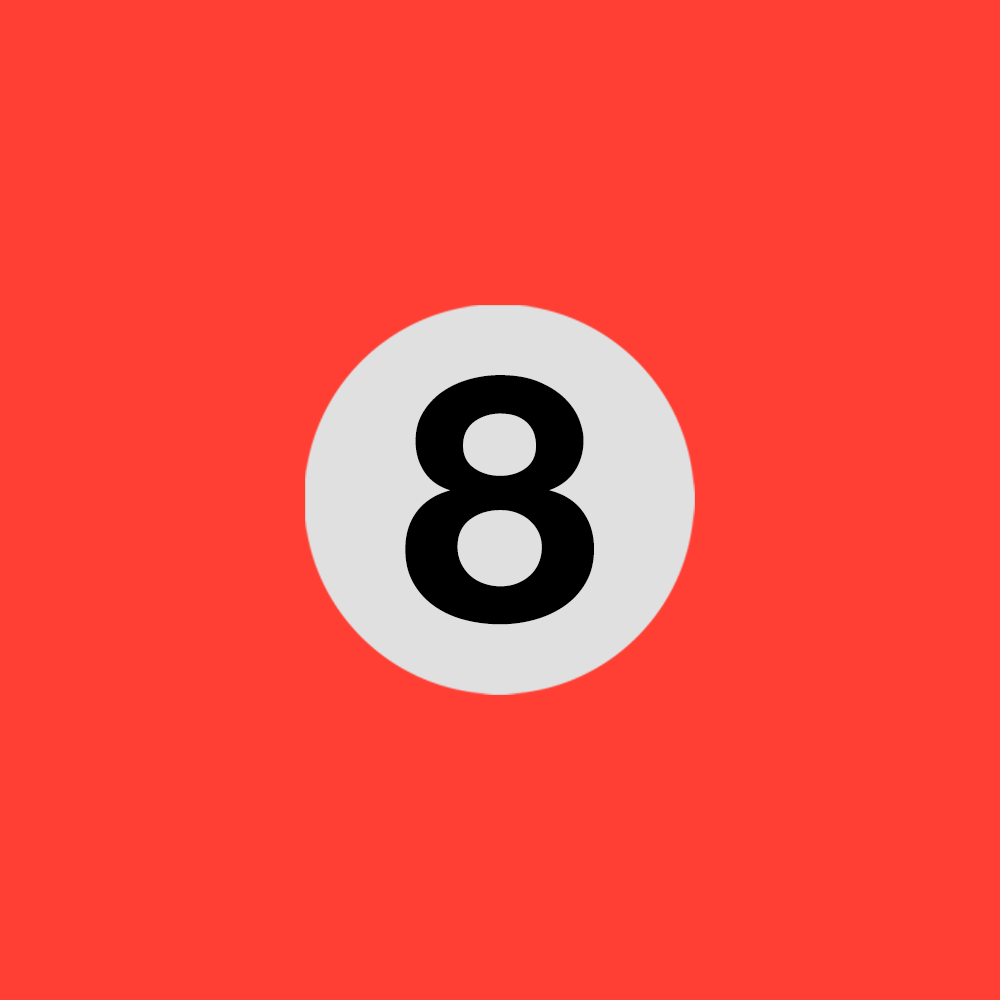
<style>
.page{position:relative;width:1000px;height:1000px;background:#ff3f34}
.page>*{position:absolute;margin:0}
.t1{font:340px "HelveticaNeue-Bold";color:#000000;font-weight:bold;scale:1.04 1}
</style>
<div class="page">
<p class="t1" style="left:405px;top:375px;width:189px;height:250px">8</p>
</div>
